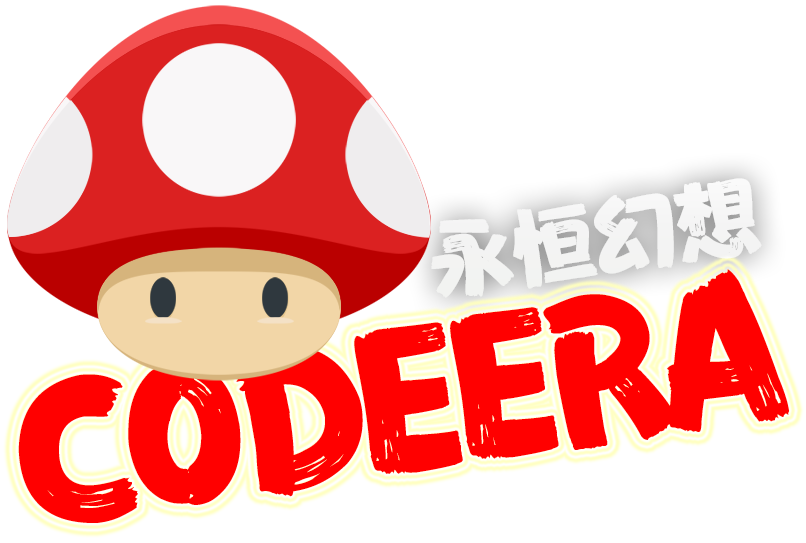
<style>
.page{position:relative;width:806px;height:543px;background:#ffffff}
.page>*{position:absolute;margin:0}
.t1{font:83px "FZFENSTXJW--GB1-0";color:#ffffff}
.t2{font:183.2px "FZFENSTXJW--GB1-0";letter-spacing:-0.08em;color:#ff0000}
</style>
<div class="page">
<p class="t1" style="left:431px;top:178px;width:331px;height:120px;rotate:-9deg">永恒幻想</p>
<p class="t2" style="left:18px;top:269px;width:771px;height:254px;rotate:-9deg">CODEERA</p>
</div>
